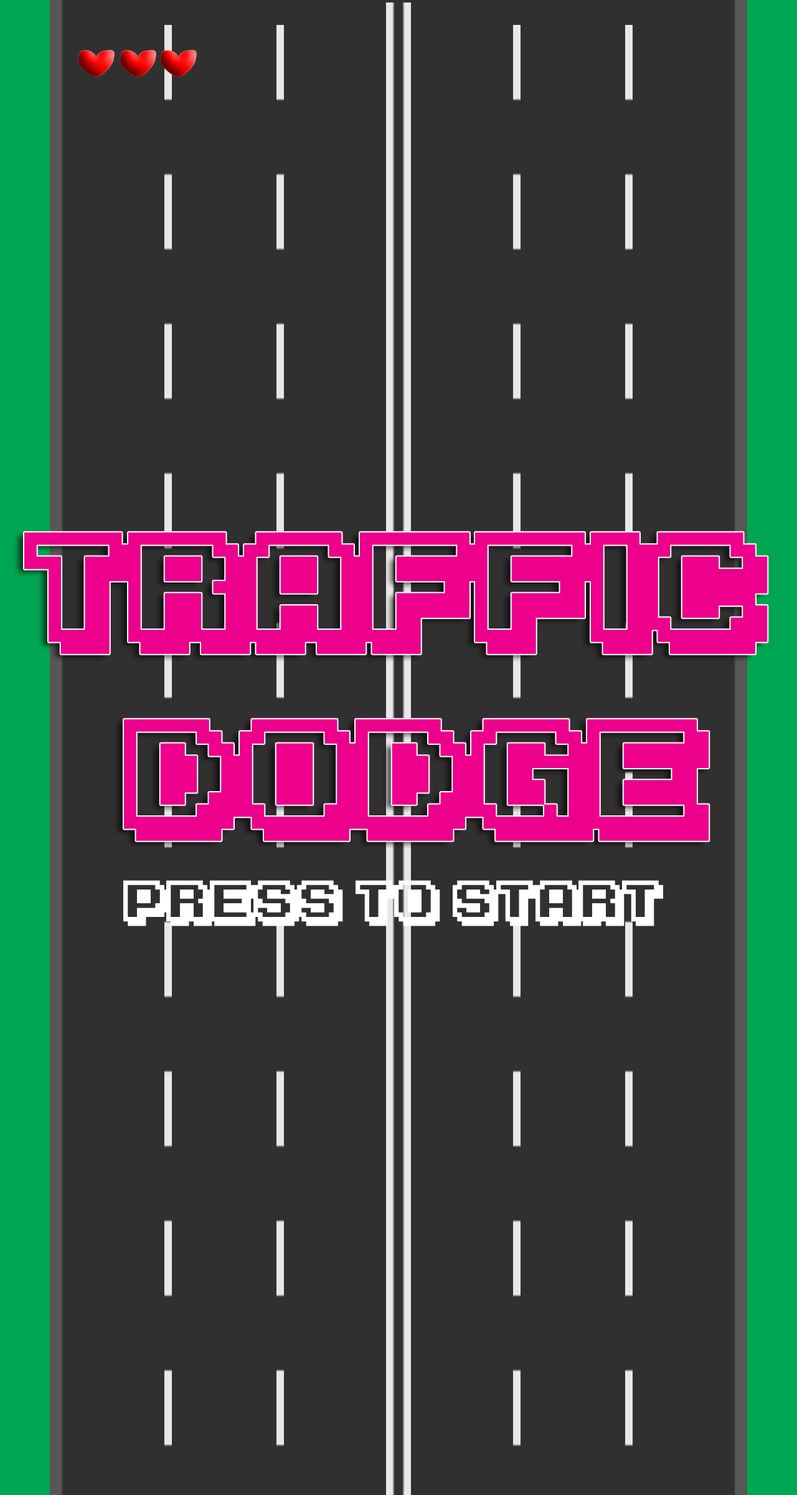
<style>
.page{position:relative;width:797px;height:1495px;background:#303030}
.page>*{position:absolute;margin:0}
.t1{font:124.6px/186.9px "KarmaticArcade";letter-spacing:0.05em;color:#ec008c}
.t2{font:46.7px "KarmaticArcade";letter-spacing:0.05em;color:#ffffff}
</style>
<div class="page">
<p class="t1" style="left:24px;top:532px;width:744px;height:309px;text-align:center">TrAffic <br>Dodge</p>
<p class="t2" style="left:123px;top:880px;width:541px;height:46px">press to start</p>
</div>
